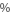
<style>
.page{position:relative;width:16px;height:16px;background:#ffffff}
.page>*{position:absolute;margin:0}
.t1{font:13px "MyriadPro-Regular";color:#666666}
</style>
<div class="page">
<p class="t1" style="left:0px;top:3px;width:10px;height:9px">%</p>
</div>
